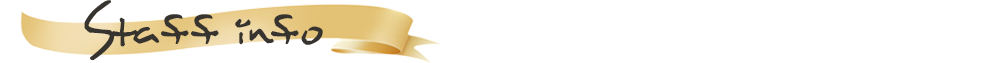
<style>
.page{position:relative;width:1000px;height:63px;background:#ffffff}
.page>*{position:absolute;margin:0}
.t1{font:78.1px "MaxineScript";color:#37332f}
</style>
<div class="page">
<p class="t1" style="left:84px;top:0px;width:239px;height:60px">Staff info</p>
</div>
